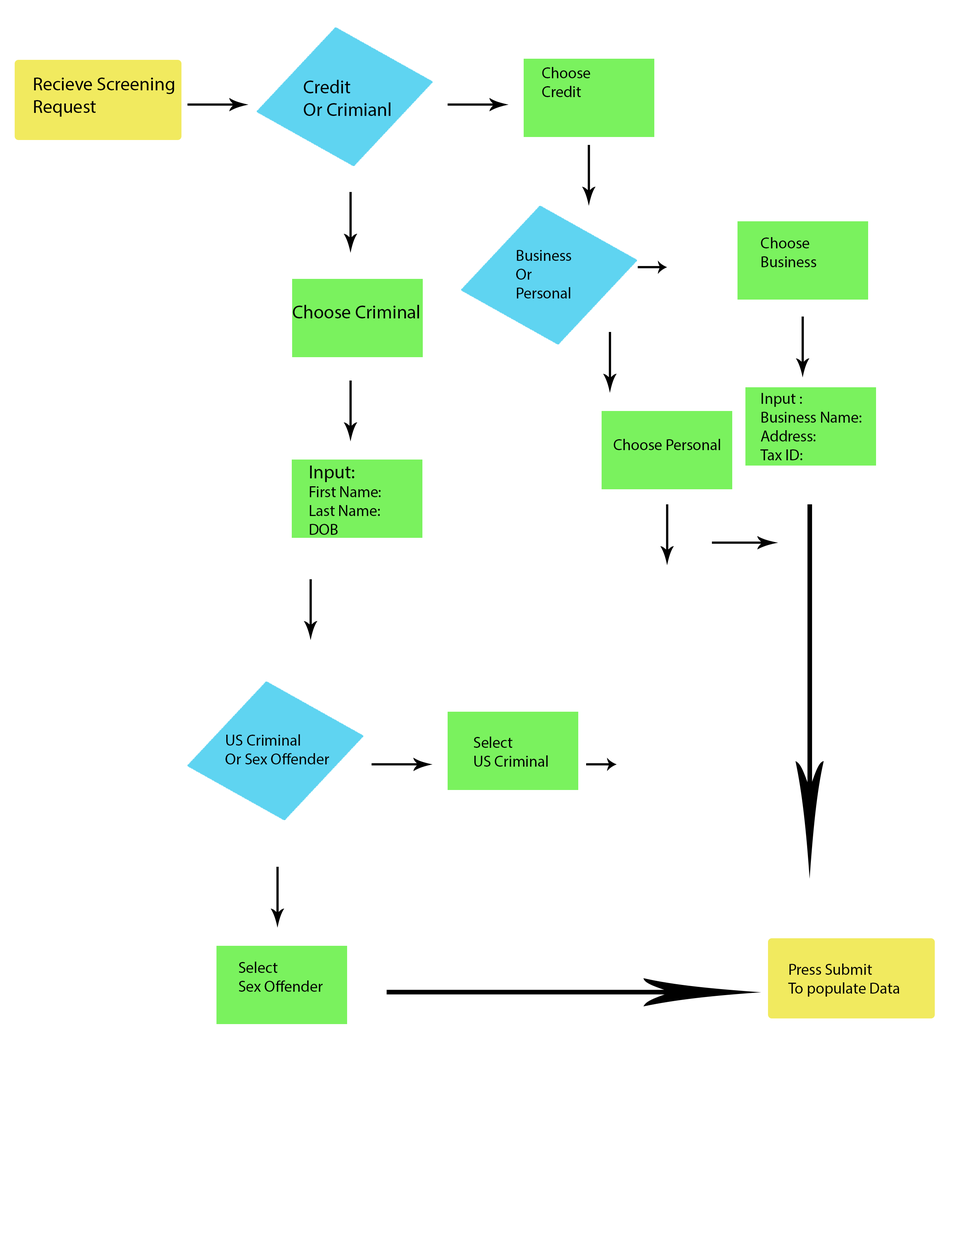
<style>
.page{position:relative;width:960px;height:1242px;background:#ffffff}
.page>*{position:absolute;margin:0}
.t1{font:4.5px "MyriadPro-Regular";color:#000000}
.t2{font:15.7px "MyriadPro-Regular";color:#020202}
.t3{font:4.5px "MyriadPro-Regular";color:#020202}
</style>
<div class="page">
<p class="t1" style="left:34px;top:78px;width:140px;height:39px">Recieve Screening<br>Request</p>
<p class="t2" style="left:542px;top:67px;width:48px;height:30px">Choose<br>Credit</p>
<p class="t1" style="left:304px;top:80px;width:86px;height:36px">Credit <br>Or Crimianl</p>
<p class="t2" style="left:761px;top:237px;width:55px;height:30px">Choose<br>Business</p>
<p class="t2" style="left:516px;top:250px;width:55px;height:49px">Business<br>Or<br>Personal</p>
<p class="t3" style="left:293px;top:305px;width:126px;height:13px">Choose Criminal</p>
<p class="t2" style="left:760px;top:393px;width:101px;height:67px">Input :<br>Business Name:<br>Address:<br>Tax ID:</p>
<p class="t2" style="left:614px;top:439px;width:106px;height:11px">Choose Personal</p>
<p class="t2" style="left:310px;top:466px;width:71px;height:69px"><span class="t3">Input:<br></span>First Name: <br>Last Name:<br>DOB</p>
<p class="t2" style="left:225px;top:734px;width:104px;height:31px">US Criminal<br>Or Sex Offender</p>
<p class="t2" style="left:474px;top:737px;width:74px;height:30px">Select<br>US Criminal</p>
<p class="t2" style="left:239px;top:962px;width:84px;height:30px">Select<br>Sex Offender</p>
<p class="t2" style="left:788px;top:964px;width:111px;height:33px">Press Submit <br>To populate Data</p>
</div>
